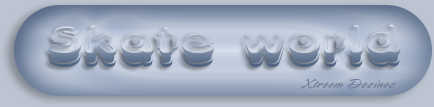
<style>
.page{position:relative;width:434px;height:107px}
.page>*{position:absolute;margin:0}
.t1{font:57.6px "XtrusionBRK";letter-spacing:0.05em;scale:0.83 1}
</style>
<div class="page">
<p class="t1" style="left:48px;top:24px;width:353px;height:43px">Skate world</p>
</div>
